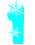
<style>
.page{position:relative;width:35px;height:45px;background:#ffffff}
.page>*{position:absolute;margin:0}
.t1{font:60px "winterflakes";color:#0ffcff}
</style>
<div class="page">
<p class="t1" style="left:7px;top:0px;width:18px;height:44px">1</p>
</div>
